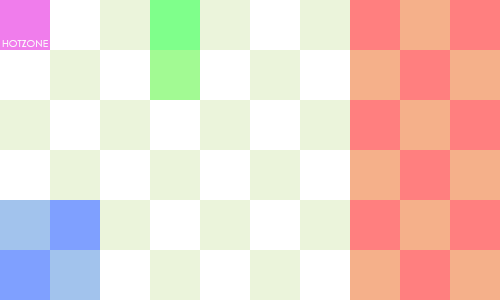
<style>
.page{position:relative;width:500px;height:300px;background:#ffffff}
.page>*{position:absolute;margin:0}
.t1{font:10px "CenturyGothic";color:#faf4fa;text-transform:uppercase}
</style>
<div class="page">
<p class="t1" style="left:2px;top:40px;width:46px;height:7px">hotzone</p>
</div>
